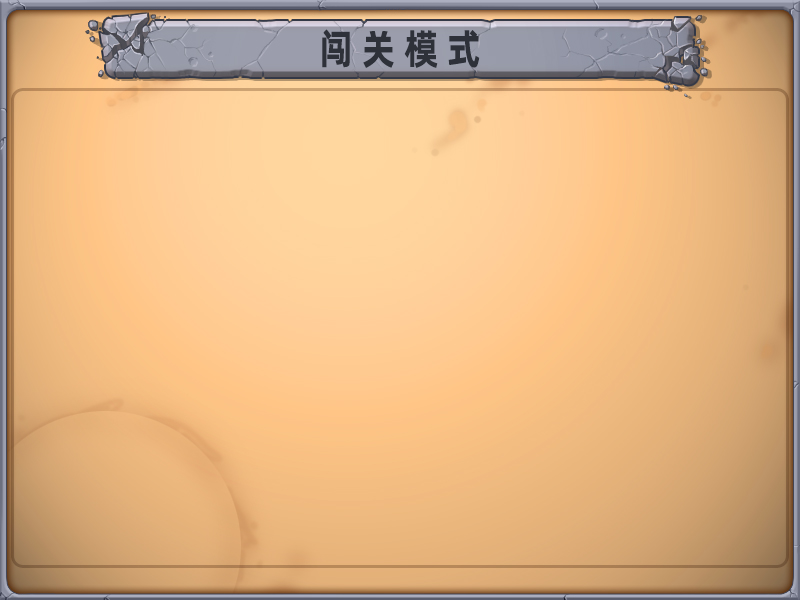
<style>
.page{position:relative;width:800px;height:600px}
.page>*{position:absolute;margin:0}
.t1{font:41px "AlibabaPuHuiTiB";color:#2e3139;scale:0.84 1}
</style>
<div class="page">
<p class="t1" style="left:322px;top:29px;width:158px;height:39px">闯 关 模 式</p>
</div>
